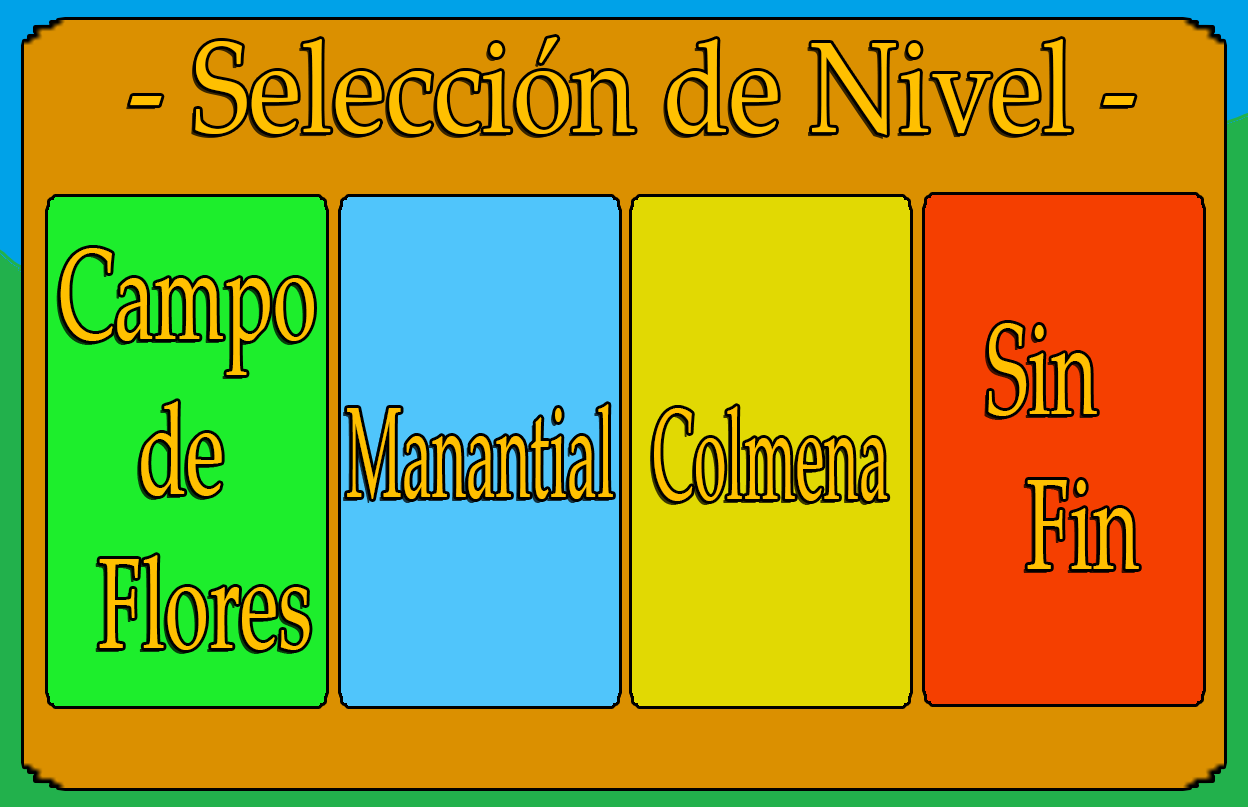
<style>
.page{position:relative;width:1248px;height:807px;background:#db9000}
.page>*{position:absolute;margin:0}
.t1{font:128.8px "PalatinoLinotype-Roman";color:#ffc000;scale:0.84 1}
.t2{font:128.8px "PalatinoLinotype-Roman";color:#ffc000;scale:0.62 1}
.t3{font:128.8px "PalatinoLinotype-Roman";color:#ffc000;scale:0.46 1}
</style>
<div class="page">
<p class="t1" style="left:130px;top:37px;width:1005px;height:98px">- Selección de Nivel -</p>
<p class="t2" style="left:60px;top:248px;width:254px;height:402px">Campo<br>    de<br>  Flores</p>
<p class="t2" style="left:988px;top:323px;width:151px;height:246px">Sin<br>  Fin</p>
<p class="t3" style="left:347px;top:404px;width:266px;height:95px">Manantial</p>
<p class="t3" style="left:654px;top:406px;width:234px;height:95px">Colmena</p>
</div>
